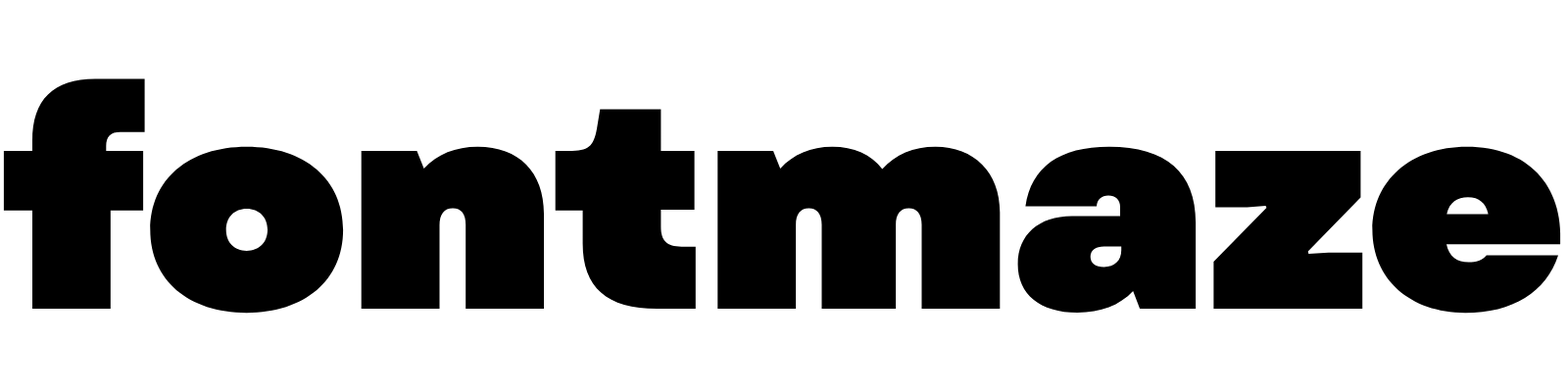
<style>
.page{position:relative;width:1568px;height:392px;background:#ffffff}
.page>*{position:absolute;margin:0}
.t1{font:294px "FONTSPRINGDEMO-GaretBlackRegular";color:#000000}
</style>
<div class="page">
<p class="t1" style="left:3px;top:78px;width:1561px;height:236px">fontmaze</p>
</div>
